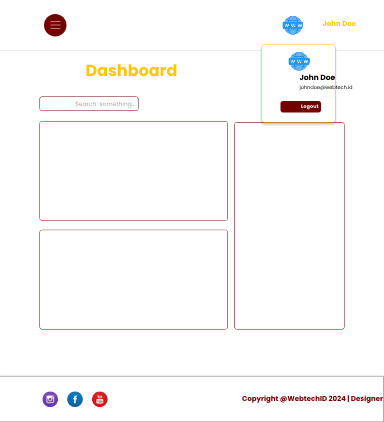
<style>
.page{position:relative;width:384px;height:422px;background:#ffffff}
.page>*{position:absolute;margin:0}
.t1{font:7px "Poppins-Bold";color:#ffc700}
.t2{font:16px "Poppins-Bold";color:#ffc700}
.t3{font:7.5px "Poppins-Bold";color:#000000}
.t4{font:5px "Poppins-Regular"}
.t5{font:6px "Poppins-Regular"}
.t6{font:5px "Poppins-Bold";color:#ffffff}
</style>
<div class="page">
<p class="t1" style="left:322px;top:20px;width:34px;height:7px">John Doe</p>
<p class="t2" style="left:86px;top:64px;width:91px;height:13px">Dashboard</p>
<p class="t3" style="left:299px;top:74px;width:36px;height:7px">John Doe</p>
<p class="t4" style="left:299px;top:85px;width:54px;height:6px">johndoe@webtech.id</p>
<p class="t5" style="left:75px;top:101px;width:61px;height:7px">Search  something...</p>
<p class="t6" style="left:301px;top:104px;width:18px;height:6px">Logout</p>
</div>
